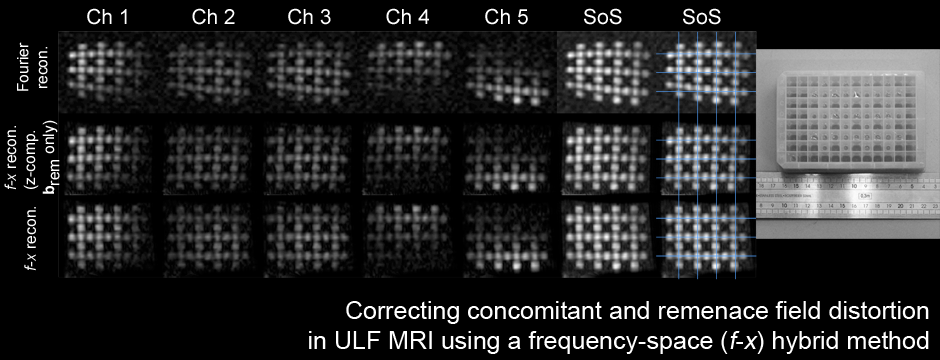
<style>
.page{position:relative;width:940px;height:360px;background:#000000}
.page>*{position:absolute;margin:0}
.t1{font:21px "ArialMT";color:#ffffff}
.t2{font:15.8px "ArialMT";color:#ffffff}
.t3{font:15.8px "Arial-ItalicMT";color:#ffffff}
.t4{font:15.8px "Arial-BoldMT";color:#ffffff}
.t5{font:25px "ArialMT";color:#ffffff}
.t6{font:25px "ArialMT";color:#ffffff;font-style:italic}
</style>
<div class="page">
<p class="t1" style="left:87px;top:8px;width:40px;height:17px">Ch 1</p>
<p class="t1" style="left:192px;top:8px;width:43px;height:17px">Ch 2</p>
<p class="t1" style="left:288px;top:8px;width:43px;height:17px">Ch 3</p>
<p class="t1" style="left:386px;top:8px;width:43px;height:17px">Ch 4</p>
<p class="t1" style="left:485px;top:8px;width:43px;height:17px">Ch 5</p>
<p class="t1" style="left:584px;top:8px;width:38px;height:17px">SoS</p>
<p class="t1" style="left:683px;top:8px;width:38px;height:17px">SoS</p>
<p class="t2" style="left:17px;top:42px;width:31px;height:49px;text-align:center;rotate:-90deg">Fourier<br>recon.</p>
<p class="t2" style="left:4px;top:120px;width:56px;height:74px;text-align:center;rotate:-90deg"><span class="t3">f-x</span> recon.<br>(z-comp. <br><span class="t4">b</span>rem only)</p>
<p class="t2" style="left:24px;top:207px;width:12px;height:64px;rotate:-90deg"><span class="t3">f-x</span> recon.</p>
<p class="t5" style="left:309px;top:301px;width:620px;height:53px;text-align:right">Correcting concomitant and remenace field distortion<br>in ULF MRI using a frequency-space (<span class="t6">f</span>-<span class="t6">x</span>) hybrid method</p>
</div>
